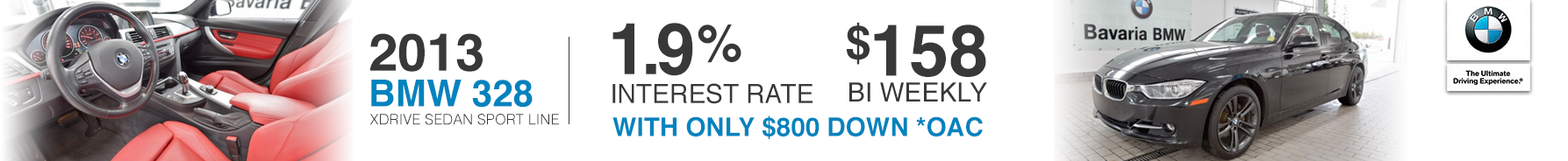
<style>
.page{position:relative;width:1568px;height:161px;background:#ffffff}
.page>*{position:absolute;margin:0}
.t1{font:72px "Helvetica-Bold";letter-spacing:-0.075em;color:#383838;text-transform:uppercase}
.t2{font:52.4px "Helvetica-Bold";color:#383838;text-transform:uppercase}
.t3{font:46.8px "Helvetica-Bold";color:#383838;text-transform:uppercase}
.t4{font:72px "Helvetica-Bold";color:#383838;text-transform:uppercase}
.t5{font:52.3px "Helvetica-Bold";color:#383838;text-transform:uppercase}
.t6{font:37.3px "Helvetica-Bold";color:#0083be;text-transform:uppercase}
.t7{font:26.5px "Helvetica";color:#383838;text-transform:uppercase}
.t8{font:14.5px "Helvetica-Light";color:#383838;text-transform:uppercase}
.t9{font:26px "Helvetica-Bold";color:#0083be;text-transform:uppercase}
</style>
<div class="page">
<p class="t1" style="left:612px;top:23px;width:81px;height:53px">1.9</p>
<p class="t2" style="left:698px;top:25px;width:43px;height:38px">%</p>
<p class="t3" style="left:847px;top:22px;width:23px;height:43px">$</p>
<p class="t4" style="left:874px;top:25px;width:112px;height:52px">158</p>
<p class="t5" style="left:369px;top:33px;width:114px;height:39px">2013</p>
<p class="t6" style="left:371px;top:80px;width:162px;height:28px">BMW 328</p>
<p class="t7" style="left:612px;top:83px;width:201px;height:21px">interest rate</p>
<p class="t7" style="left:849px;top:82px;width:138px;height:20px">bi weekly</p>
<p class="t8" style="left:369px;top:114px;width:190px;height:11px">xDrive Sedan Sport Line</p>
<p class="t9" style="left:612px;top:116px;width:371px;height:24px">with only $800 down *OAC</p>
</div>
